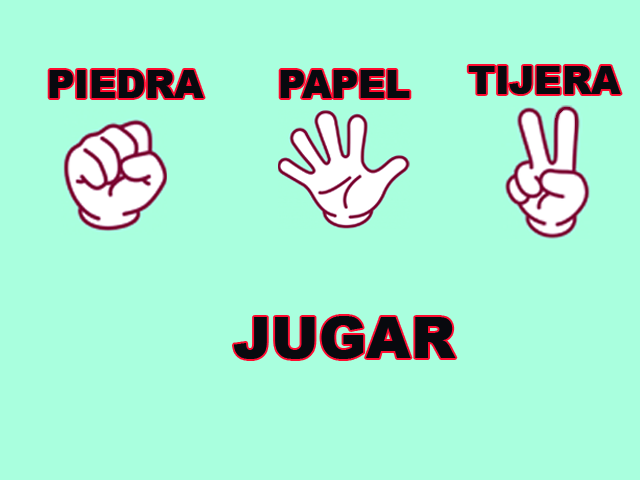
<style>
.page{position:relative;width:640px;height:480px;background:#a9ffde}
.page>*{position:absolute;margin:0}
.t1{font:37.5px "Arial-Black";color:#08090e}
.t2{font:57.2px "Arial-Black";color:#08090e}
</style>
<div class="page">
<p class="t1" style="left:49px;top:70px;width:155px;height:28px">PIEDRA</p>
<p class="t1" style="left:280px;top:70px;width:130px;height:28px">PAPEL</p>
<p class="t1" style="left:468px;top:66px;width:153px;height:28px">TIJERA</p>
<p class="t2" style="left:234px;top:316px;width:222px;height:43px">JUGAR</p>
</div>
